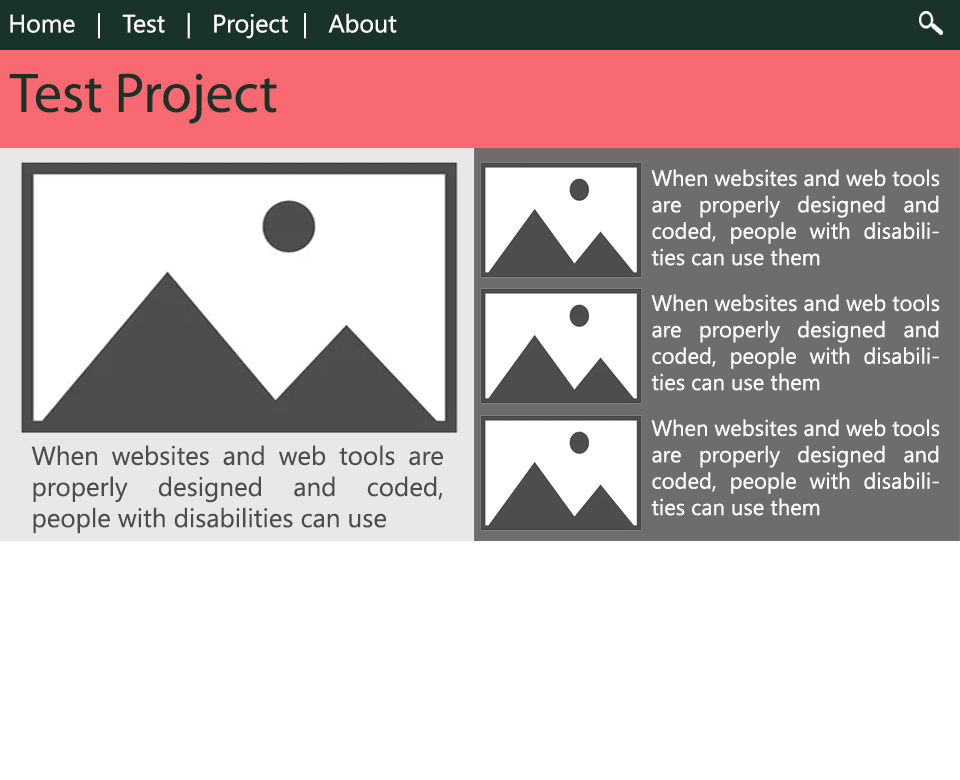
<style>
.page{position:relative;width:960px;height:780px;background:#ffffff}
.page>*{position:absolute;margin:0}
.t1{font:25px "NirmalaUI";color:#ffffff}
.t2{font:56px "MyriadPro-Regular";color:#193328}
.t3{font:22px "NirmalaUI";color:#ffffff}
.t4{font:26px "NirmalaUI";color:#4d4d4d}
</style>
<div class="page">
<p class="t1" style="left:10px;top:13px;width:387px;height:26px">Home   |   Test   |   Project  |   About</p>
<p class="t2" style="left:9px;top:73px;width:268px;height:51px">Test Project</p>
<p class="t3" style="left:651px;top:169px;width:289px;height:97px;text-align:justify">When websites and web tools are properly designed and coded, people with disabilities can use them</p>
<p class="t3" style="left:651px;top:294px;width:289px;height:97px;text-align:justify">When websites and web tools are properly designed and coded, people with disabilities can use them</p>
<p class="t3" style="left:651px;top:419px;width:289px;height:97px;text-align:justify">When websites and web tools are properly designed and coded, people with disabilities can use them</p>
<p class="t4" style="left:31px;top:445px;width:412px;height:89px;text-align:justify">When websites and web tools are properly designed and coded, people with disabilities can use</p>
</div>
